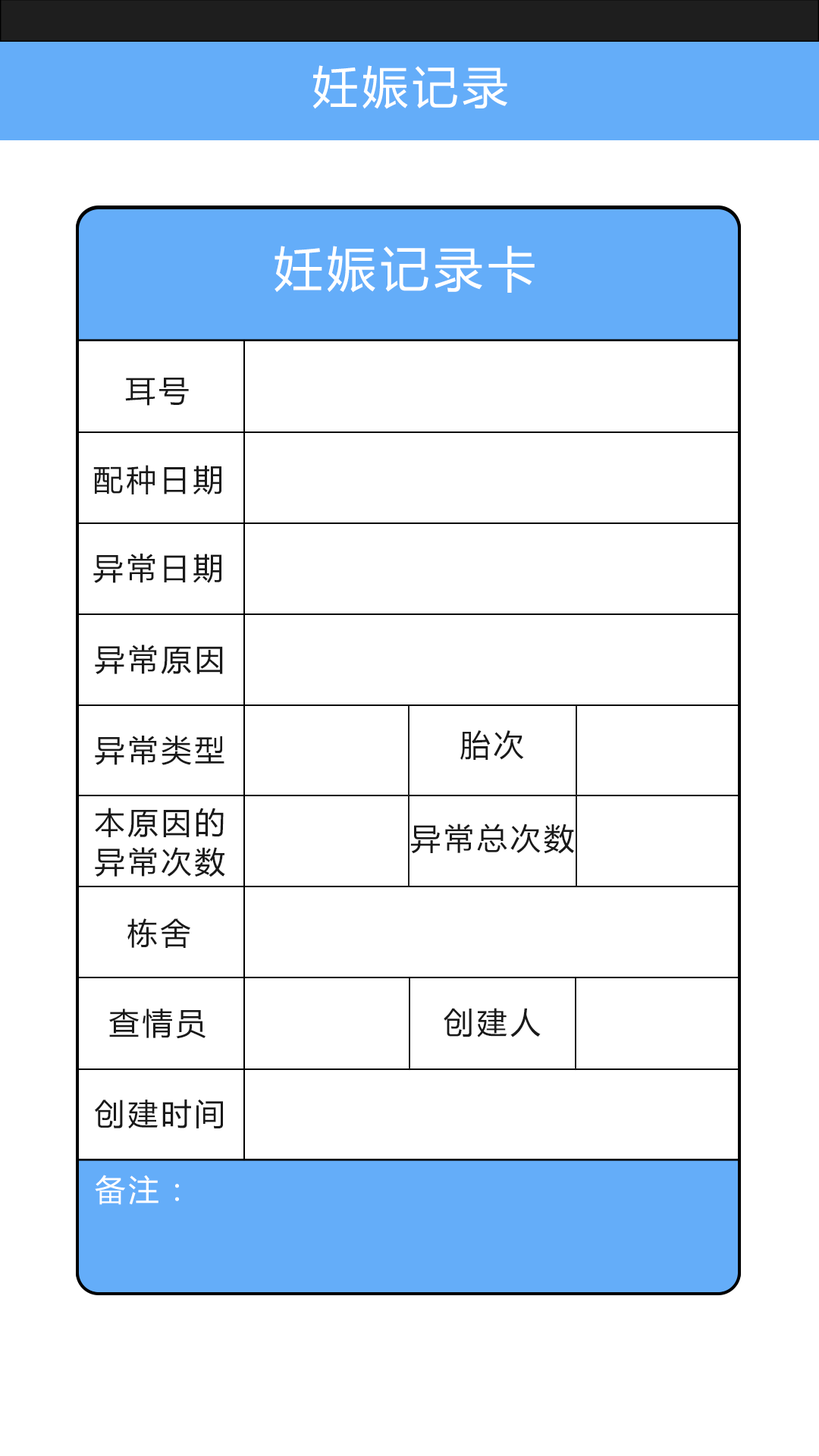
<style>
.page{position:relative;width:819px;height:1456px;background:#ffffff}
.page>*{position:absolute;margin:0}
.t1{font:45.5px "MicrosoftYaHei";letter-spacing:0.1em;color:#ffffff}
.t2{font:48.5px "MicrosoftYaHei";letter-spacing:0.1em;color:#ffffff}
.t3{font:30.3px "MicrosoftYaHei";letter-spacing:0.1em;color:#191919}
.t4{font:30.3px "MicrosoftYaHei";letter-spacing:0.1em;color:#ffffff}
</style>
<div class="page">
<p class="t1" style="left:312px;top:65px;width:195px;height:44px">妊娠记录</p>
<p class="t2" style="left:275px;top:246px;width:260px;height:47px">妊娠记录卡</p>
<p class="t3" style="left:125px;top:378px;width:64px;height:28px">耳号</p>
<p class="t3" style="left:93px;top:465px;width:128px;height:30px">配种日期</p>
<p class="t3" style="left:93px;top:554px;width:128px;height:29px">异常日期</p>
<p class="t3" style="left:95px;top:645px;width:128px;height:30px">异常原因</p>
<p class="t3" style="left:95px;top:736px;width:129px;height:29px">异常类型</p>
<p class="t3" style="left:460px;top:730px;width:64px;height:30px">胎次</p>
<p class="t3" style="left:95px;top:808px;width:129px;height:30px">本原因的</p>
<p class="t3" style="left:410px;top:824px;width:164px;height:30px">异常总次数</p>
<p class="t3" style="left:95px;top:847px;width:130px;height:30px">异常次数</p>
<p class="t3" style="left:127px;top:918px;width:63px;height:30px">栋舍</p>
<p class="t3" style="left:109px;top:1009px;width:97px;height:30px">查情员</p>
<p class="t3" style="left:444px;top:1008px;width:97px;height:29px">创建人</p>
<p class="t3" style="left:95px;top:1099px;width:128px;height:30px">创建时间</p>
<p class="t4" style="left:95px;top:1175px;width:84px;height:30px">备注：</p>
</div>
